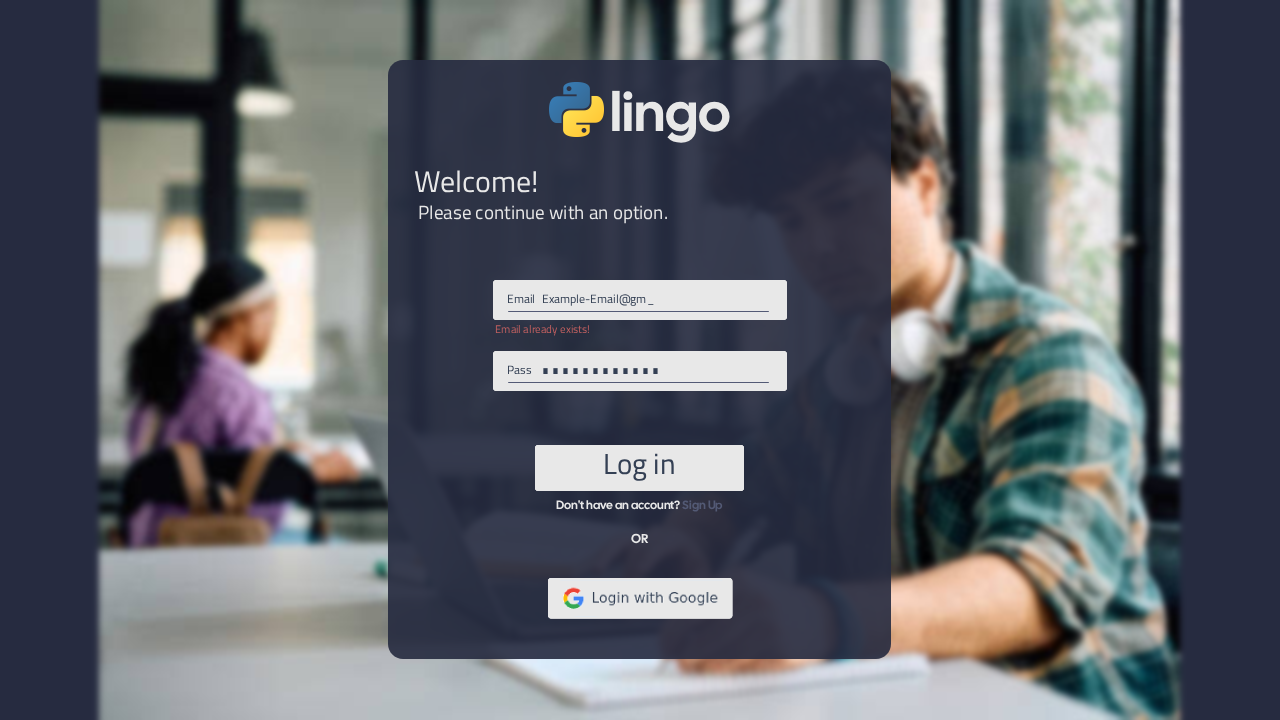
<style>
.page{position:relative;width:1280px;height:720px}
.page>*{position:absolute;margin:0}
.t1{font:30px "Cairo-Regular";color:#e8e8e8}
.t2{font:19px "Cairo-Regular";color:#e8e8e8}
.t3{font:12px "Cairo-Regular";color:#344054}
.t4{font:11.1px "Cairo-Regular";color:#c36060}
.t5{font:50px "Cairo-Regular";color:#344054}
.t6{font:29px "Cairo-Regular";color:#344054}
.t7{font:12px "CalSans-Regular";color:#e8e8e8}
.t8{font:12px "CalSans-Regular";color:#535a75}
.t9{font:13px "CalSans-Regular";color:#e8e8e8}
</style>
<div class="page">
<p class="t1" style="left:414px;top:170px;width:123px;height:23px">Welcome!</p>
<p class="t2" style="left:419px;top:205px;width:248px;height:19px">Please continue with an option.</p>
<p class="t3" style="left:508px;top:294px;width:26px;height:10px">Email</p>
<p class="t3" style="left:543px;top:294px;width:111px;height:12px">Example-Email@gm_</p>
<p class="t4" style="left:495px;top:325px;width:94px;height:11px">Email already exists!</p>
<p class="t3" style="left:508px;top:365px;width:24px;height:10px">Pass</p>
<p class="t5" style="left:543px;top:368px;width:5px;height:6px">.</p>
<p class="t5" style="left:553px;top:368px;width:5px;height:6px">.</p>
<p class="t5" style="left:563px;top:368px;width:5px;height:6px">.</p>
<p class="t5" style="left:573px;top:368px;width:5px;height:6px">.</p>
<p class="t5" style="left:583px;top:368px;width:5px;height:6px">.</p>
<p class="t5" style="left:583px;top:368px;width:5px;height:6px">.</p>
<p class="t5" style="left:593px;top:368px;width:5px;height:6px">.</p>
<p class="t5" style="left:593px;top:368px;width:5px;height:6px">.</p>
<p class="t5" style="left:603px;top:368px;width:5px;height:6px">.</p>
<p class="t5" style="left:603px;top:368px;width:5px;height:6px">.</p>
<p class="t5" style="left:613px;top:368px;width:5px;height:6px">.</p>
<p class="t5" style="left:613px;top:368px;width:5px;height:6px">.</p>
<p class="t5" style="left:623px;top:368px;width:5px;height:6px">.</p>
<p class="t5" style="left:633px;top:368px;width:5px;height:6px">.</p>
<p class="t5" style="left:643px;top:368px;width:5px;height:6px">.</p>
<p class="t5" style="left:653px;top:368px;width:5px;height:6px">.</p>
<p class="t6" style="left:605px;top:453px;width:69px;height:28px">Log in</p>
<p class="t7" style="left:556px;top:500px;width:167px;height:12px">Don't have an account? <span class="t8">Sign Up</span></p>
<p class="t9" style="left:631px;top:533px;width:18px;height:11px">OR</p>
</div>
